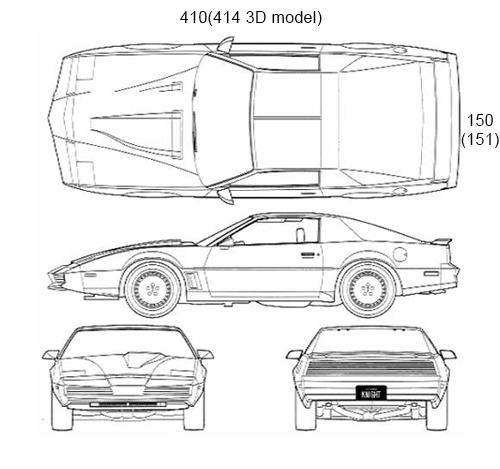
<style>
.page{position:relative;width:500px;height:469px;background:#fefefe}
.page>*{position:absolute;margin:0}
.t1{font:16px "ArialMT";letter-spacing:0.02em;color:#000000}
</style>
<div class="page">
<p class="t1" style="left:180px;top:11px;width:142px;height:15px">410(414 3D model)</p>
<p class="t1" style="left:461px;top:114px;width:38px;height:34px;text-align:center">150<br>(151)</p>
</div>
